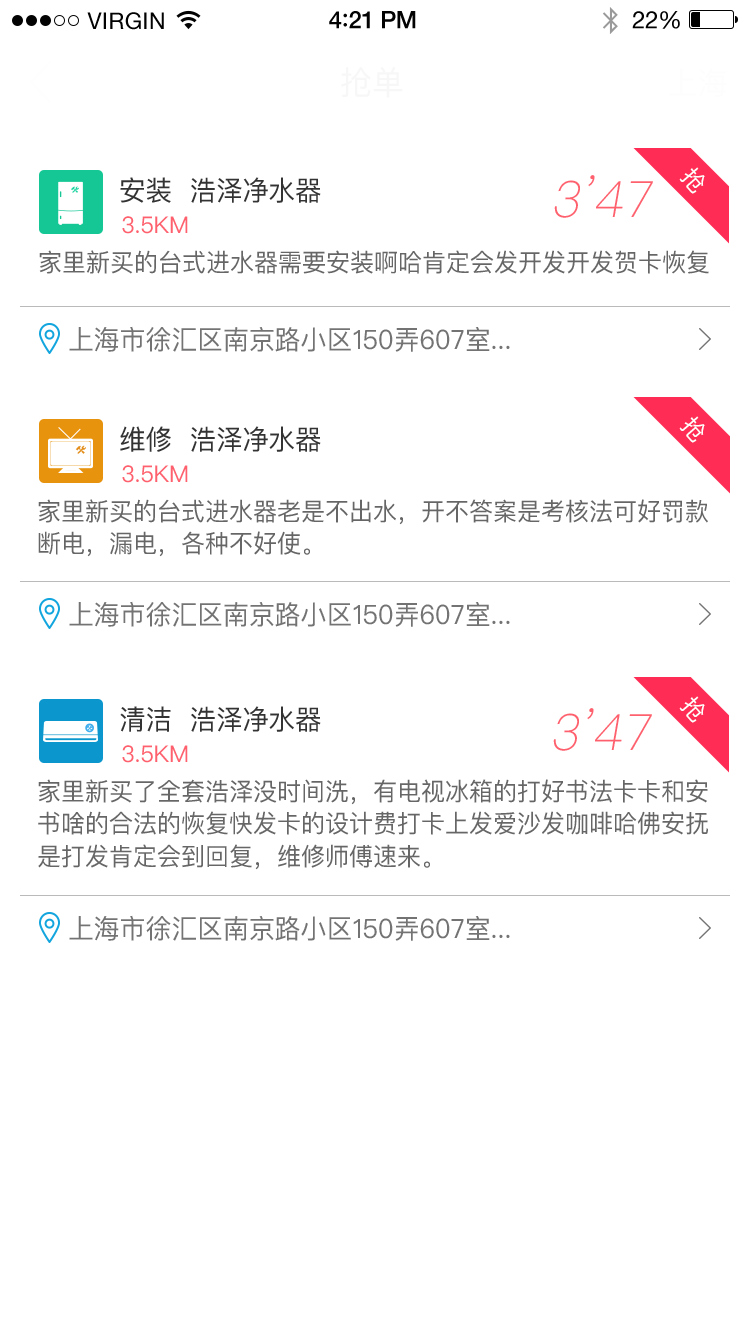
<style>
.page{position:relative;width:750px;height:1334px;background:#ffffff}
.page>*{position:absolute;margin:0}
.t1{font:23px "HelveticaNeue";letter-spacing:0.02em;color:#020202}
.t2{font:24px "HelveticaNeue-Medium";letter-spacing:-0.02em;color:#020202}
.t3{font:26px "Avenir-Medium";letter-spacing:-0.02em;color:#020202}
.t4{font:24px "HelveticaNeue";letter-spacing:-0.02em;color:#020202}
.t5{font:33px "PingFangSC-Regular";color:#f7f7f7}
.t6{font:23.5px "PingFangSC-Regular";color:#ffffff}
.t7{font:27.4px "PingFangSC-Regular";color:#333333;scale:0.97 1}
.t8{font:50.1px "PingFangSC-Thin";color:#fe616d;font-style:italic}
.t9{font:23px "PingFangSC-Regular";color:#fe616d}
.t10{font:24.7px "PingFangSC-Regular";color:#666666}
.t11{font:26.8px "PingFangSC-Regular";color:#737373;scale:0.97 1}
</style>
<div class="page">
<p class="t1" style="left:87px;top:12px;width:77px;height:18px">VIRGIN</p>
<p class="t2" style="left:329px;top:11px;width:87px;height:18px">4<span class="t3">:</span>21 PM</p>
<p class="t4" style="left:632px;top:11px;width:48px;height:18px">22%</p>
<p class="t5" style="left:341px;top:66px;width:62px;height:32px">抢单</p>
<p class="t6" style="left:679px;top:167px;width:26px;height:27px;rotate:49deg">抢</p>
<p class="t7" style="left:120px;top:177px;width:201px;height:26px">安装  浩泽净水器</p>
<p class="t8" style="left:554px;top:175px;width:99px;height:43px">3’47</p>
<p class="t9" style="left:122px;top:216px;width:66px;height:18px">3.5KM</p>
<p class="t10" style="left:39px;top:250px;width:670px;height:24px">家里新买的台式进水器需要安装啊哈肯定会发开发开发贺卡恢复</p>
<p class="t11" style="left:69px;top:326px;width:441px;height:26px">上海市徐汇区南京路小区150弄607室...</p>
<p class="t6" style="left:679px;top:416px;width:26px;height:27px;rotate:49deg">抢</p>
<p class="t7" style="left:120px;top:426px;width:201px;height:26px">维修  浩泽净水器</p>
<p class="t9" style="left:122px;top:465px;width:66px;height:18px">3.5KM</p>
<p class="t10" style="left:38px;top:499px;width:670px;height:58px">家里新买的台式进水器老是不出水，开不答案是考核法可好罚款<br>断电，漏电，各种不好使。</p>
<p class="t11" style="left:69px;top:601px;width:441px;height:26px">上海市徐汇区南京路小区150弄607室...</p>
<p class="t6" style="left:679px;top:696px;width:26px;height:27px;rotate:49deg">抢</p>
<p class="t7" style="left:120px;top:706px;width:201px;height:26px">清洁  浩泽净水器</p>
<p class="t8" style="left:553px;top:708px;width:99px;height:43px">3’47</p>
<p class="t9" style="left:122px;top:745px;width:66px;height:18px">3.5KM</p>
<p class="t10" style="left:38px;top:779px;width:670px;height:91px">家里新买了全套浩泽没时间洗，有电视冰箱的打好书法卡卡和安<br>书啥的合法的恢复快发卡的设计费打卡上发爱沙发咖啡哈佛安抚<br>是打发肯定会到回复，维修师傅速来。</p>
<p class="t11" style="left:69px;top:915px;width:441px;height:26px">上海市徐汇区南京路小区150弄607室...</p>
</div>
